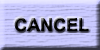
<style>
.page{position:relative;width:100px;height:50px}
.page>*{position:absolute;margin:0}
.t1{font:18px "Arial-BoldMT";color:#000000}
</style>
<div class="page">
<p class="t1" style="left:14px;top:17px;width:75px;height:15px">CANCEL</p>
</div>
